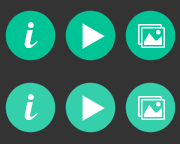
<style>
.page{position:relative;width:180px;height:144px;background:#333333}
.page>*{position:absolute;margin:0}
.t1{font:36px "Lobster1.3";letter-spacing:-0.01em;color:#ffffff}
</style>
<div class="page">
<p class="t1" style="left:24px;top:22px;width:14px;height:26px">i</p>
<p class="t1" style="left:24px;top:94px;width:14px;height:26px">i</p>
</div>
